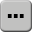
<style>
.page{position:relative;width:32px;height:32px;background:#c1c1c0}
.page>*{position:absolute;margin:0}
.t1{font:18px "Arial-Black";color:#000000}
</style>
<div class="page">
<p class="t1" style="left:7px;top:14px;width:17px;height:4px">...</p>
</div>
